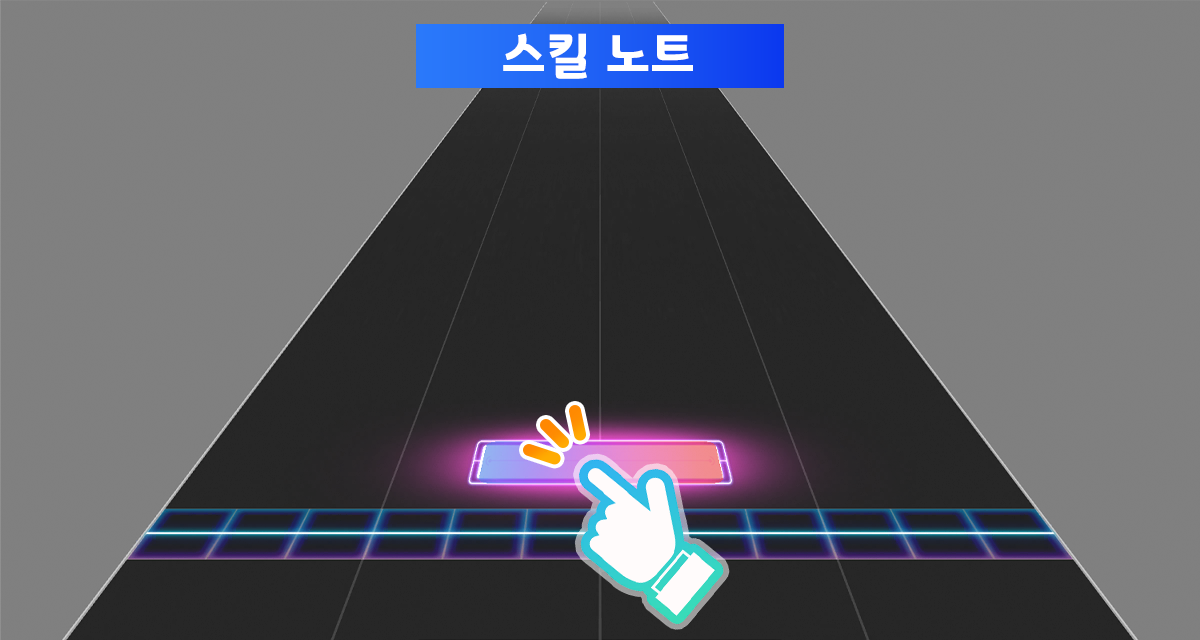
<style>
.page{position:relative;width:1200px;height:640px;background:#808080}
.page>*{position:absolute;margin:0}
.t1{font:50.7px "GyeonggiTitleB";letter-spacing:0.03em;color:#ffffff}
</style>
<div class="page">
<p class="t1" style="left:503px;top:33px;width:190px;height:46px">스킬 노트</p>
</div>
